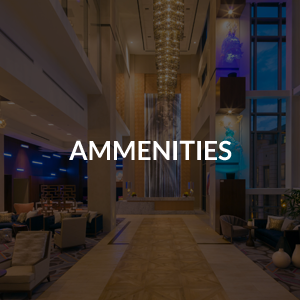
<style>
.page{position:relative;width:300px;height:300px}
.page>*{position:absolute;margin:0}
.t1{font:26.2px "Lato-Bold";color:#ffffff;text-transform:uppercase}
</style>
<div class="page">
<p class="t1" style="left:69px;top:140px;width:163px;height:21px">Ammenities</p>
</div>
